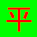
<style>
.page{position:relative;width:37px;height:37px;background:#00ff00}
.page>*{position:absolute;margin:0}
.t1{font:29.6px "MS-PGothic";color:#ff0000}
</style>
<div class="page">
<p class="t1" style="left:6px;top:7px;width:26px;height:25px">平</p>
</div>
